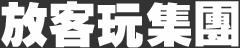
<style>
.page{position:relative;width:240px;height:48px;background:#fefefe}
.page>*{position:absolute;margin:0}
.t1{font:48.7px "IDHeiUltra";letter-spacing:0.02em;color:#fefefe;scale:0.97 1}
</style>
<div class="page">
<p class="t1" style="left:1px;top:1px;width:238px;height:47px">放客玩集團</p>
</div>
